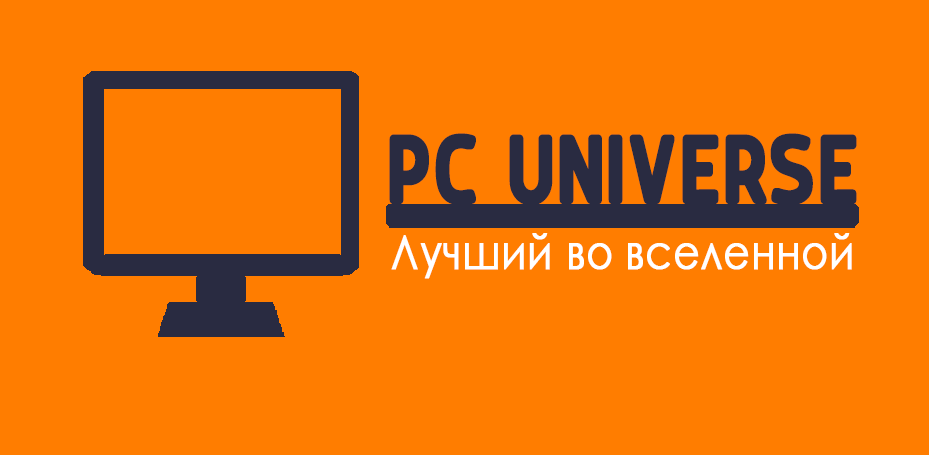
<style>
.page{position:relative;width:929px;height:455px;background:#ff7d00}
.page>*{position:absolute;margin:0}
.t1{font:97.8px "KarlsenRound-Bold";color:#292b41;font-weight:bold;scale:0.85 1}
.t2{font:47.5px "CenturyGothic";color:#ffffff;font-weight:bold;scale:0.85 1}
</style>
<div class="page">
<p class="t1" style="left:389px;top:133px;width:468px;height:73px">PC UNIVERSE</p>
<p class="t2" style="left:391px;top:233px;width:461px;height:46px">Лучший во вселенной</p>
</div>
